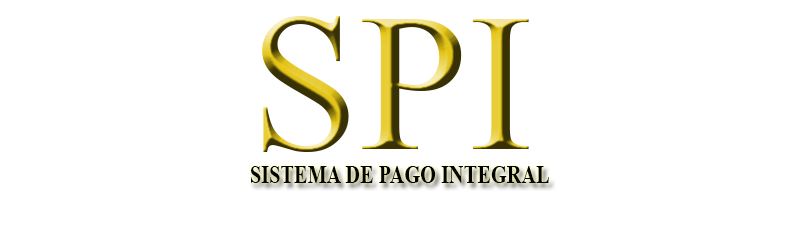
<style>
.page{position:relative;width:800px;height:229px;background:#ffffff}
.page>*{position:absolute;margin:0}
.t1{font:196.2px "TimesNewRomanPSMT"}
.t2{font:26.4px "TimesNewRomanPS-BoldMT";color:#060606;scale:0.77 1}
</style>
<div class="page">
<p class="t1" style="left:262px;top:16px;width:267px;height:136px">SPI</p>
<p class="t2" style="left:251px;top:166px;width:298px;height:17px">SISTEMA DE PAGO INTEGRAL</p>
</div>
